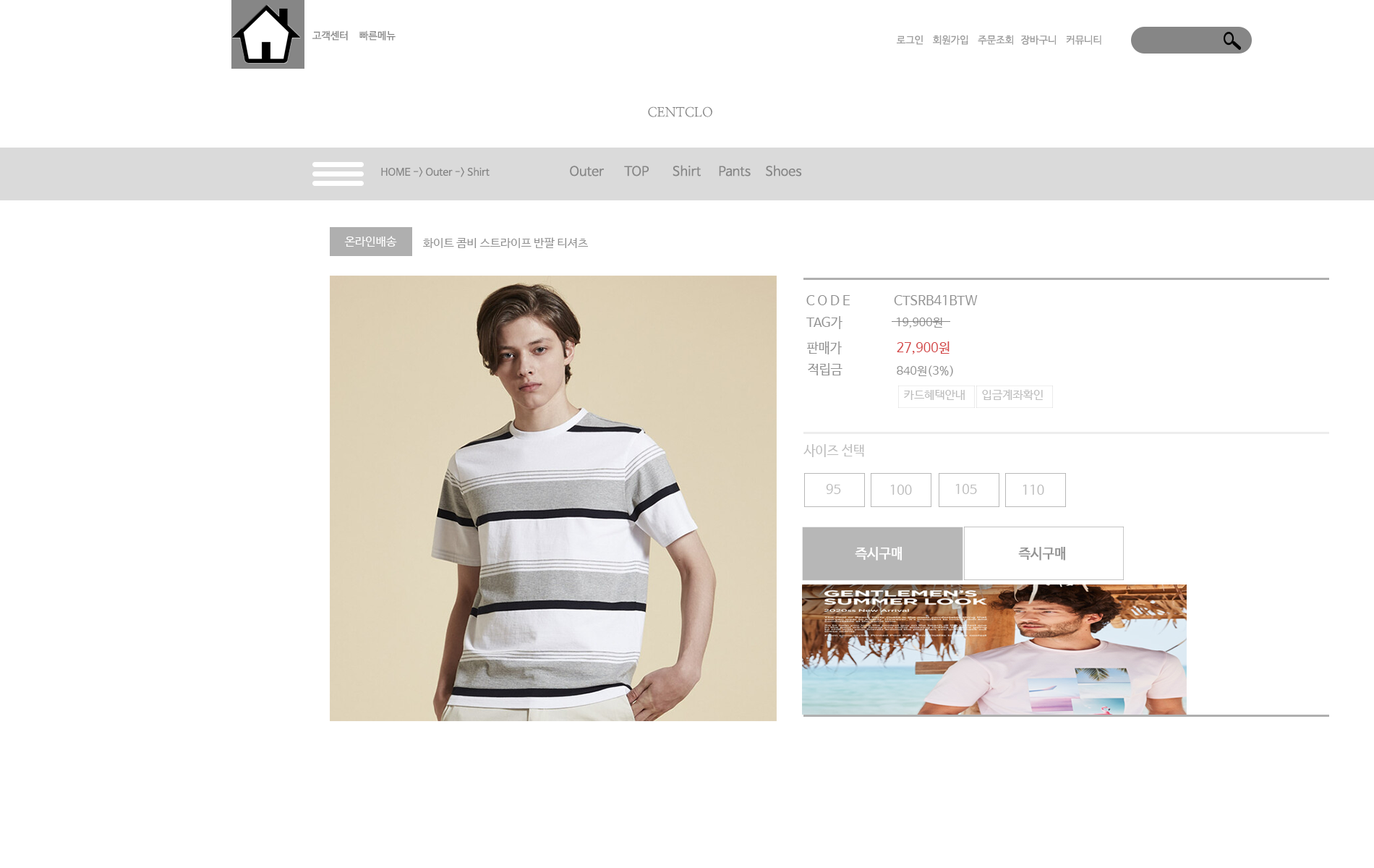
<style>
.page{position:relative;width:1374px;height:868px;background:#ffffff}
.page>*{position:absolute;margin:0}
.t1{font:10.1px "NanumBarunGothic";color:#868686}
.t2{font:10.1px "NanumBarunGothic";color:#9c9c9c}
.t3{font:13px "NanumMyeongjo";color:#868686}
.t4{font:13px "NanumBarunGothic";color:#868686}
.t5{font:11.9px "NanumBarunGothic";color:#ffffff}
.t6{font:11.9px "NanumBarunGothic";color:#929292}
.t7{font:13.4px "NanumBarunGothic";color:#929292}
.t8{font:13.4px "NanumBarunGothic";color:#d44748}
.t9{font:11.9px "NanumBarunGothic";color:#bdbdbd}
.t10{font:13.4px "NanumBarunGothic";color:#bdbdbd}
.t11{font:13.4px "NanumBarunGothic";color:#ffffff;font-weight:bold}
.t12{font:13.4px "NanumBarunGothic";color:#929292;font-weight:bold}
</style>
<div class="page">
<p class="t1" style="left:312px;top:30px;width:36px;height:10px">고객센터</p>
<p class="t1" style="left:359px;top:30px;width:37px;height:10px">빠른메뉴</p>
<p class="t2" style="left:897px;top:35px;width:204px;height:10px">로그인    회원가입    주문조회   장바구니    커뮤니티</p>
<p class="t3" style="left:648px;top:106px;width:64px;height:11px">CENTCLO</p>
<p class="t1" style="left:381px;top:167px;width:109px;height:10px">HOME -&gt; Outer -&gt; Shirt</p>
<p class="t4" style="left:570px;top:165px;width:232px;height:11px">Outer       TOP        Shirt      Pants     Shoes</p>
<p class="t5" style="left:344px;top:236px;width:53px;height:11px">온라인배송</p>
<p class="t6" style="left:423px;top:237px;width:166px;height:11px">화이트 콤비 스트라이프 반팔 티셔츠</p>
<p class="t7" style="left:806px;top:295px;width:172px;height:10px">C O D E               CTSRB41BTW</p>
<p class="t7" style="left:806px;top:316px;width:37px;height:13px">TAG가</p>
<p class="t6" style="left:897px;top:317px;width:45px;height:11px">19,900원</p>
<p class="t7" style="left:807px;top:341px;width:35px;height:13px">판매가</p>
<p class="t8" style="left:897px;top:341px;width:53px;height:13px">27,900원</p>
<p class="t7" style="left:808px;top:363px;width:35px;height:12px">적립금</p>
<p class="t6" style="left:897px;top:365px;width:56px;height:12px">840원(3%)</p>
<p class="t9" style="left:904px;top:390px;width:61px;height:10px">카드혜택안내</p>
<p class="t9" style="left:982px;top:389px;width:61px;height:11px">입금계좌확인</p>
<p class="t10" style="left:803px;top:444px;width:61px;height:13px"><span class="t9"> </span>사이즈 선택</p>
<p class="t10" style="left:826px;top:484px;width:15px;height:10px">95</p>
<p class="t10" style="left:890px;top:485px;width:22px;height:10px">100</p>
<p class="t10" style="left:955px;top:484px;width:22px;height:10px">105</p>
<p class="t10" style="left:1023px;top:485px;width:21px;height:10px">110</p>
<p class="t11" style="left:855px;top:547px;width:47px;height:13px">즉시구매</p>
<p class="t12" style="left:1018px;top:547px;width:47px;height:13px">즉시구매</p>
</div>
